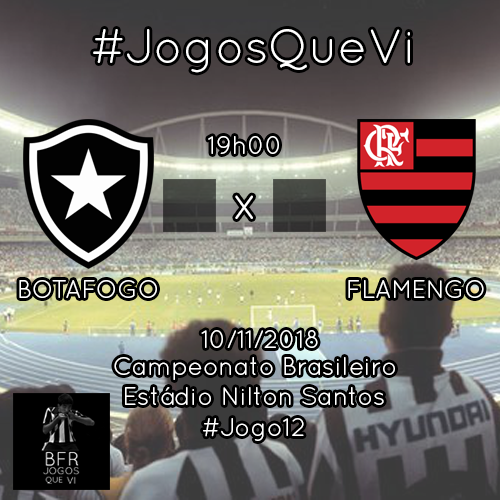
<style>
.page{position:relative;width:500px;height:500px}
.page>*{position:absolute;margin:0}
.t1{font:48px "QuicksandBook-Regular";color:#ffffff}
.t2{font:25px "QuicksandBook-Regular";color:#ffffff}
</style>
<div class="page">
<p class="t1" style="left:93px;top:29px;width:317px;height:44px">#JogosQueVi</p>
<p class="t2" style="left:208px;top:136px;width:71px;height:18px">19h00</p>
<p class="t1" style="left:235px;top:195px;width:18px;height:24px">x</p>
<p class="t2" style="left:19px;top:280px;width:138px;height:18px">BOTAFOGO</p>
<p class="t2" style="left:348px;top:280px;width:136px;height:18px">FLAMENGO</p>
<p class="t2" style="left:201px;top:330px;width:117px;height:18px">10/11/2018</p>
<p class="t2" style="left:114px;top:357px;width:281px;height:23px">Campeonato Brasileiro</p>
<p class="t2" style="left:125px;top:387px;width:259px;height:18px">Estádio Nilton Santos</p>
<p class="t2" style="left:203px;top:418px;width:101px;height:23px">#Jogo12</p>
</div>
